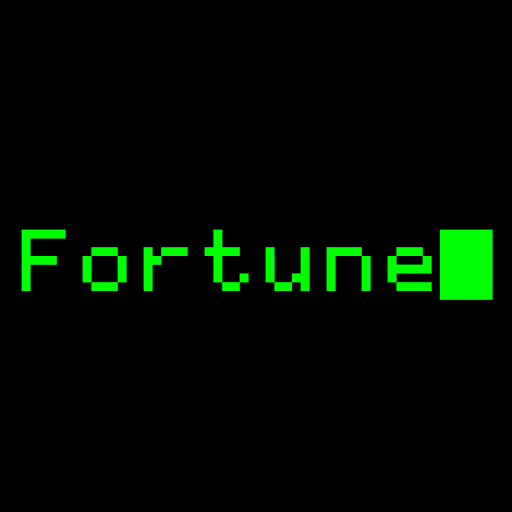
<style>
.page{position:relative;width:512px;height:512px;background:#000000}
.page>*{position:absolute;margin:0}
.t1{font:70px "PrintChar21";color:#00ff00}
</style>
<div class="page">
<p class="t1" style="left:21px;top:229px;width:472px;height:71px">Fortune▉</p>
</div>
